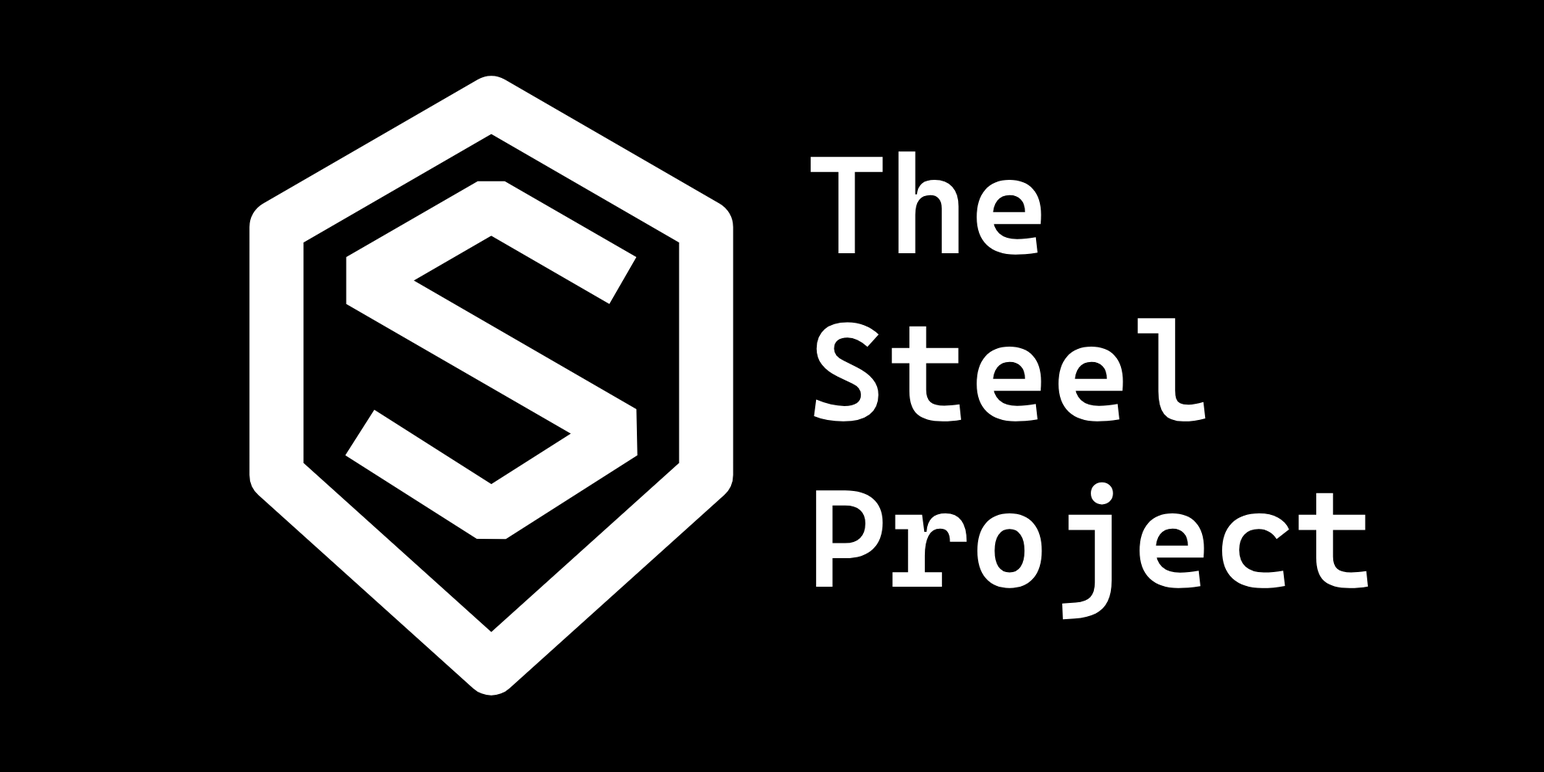
<style>
.page{position:relative;width:1544px;height:772px;background:#000000}
.page>*{position:absolute;margin:0}
.t1{font:139px "CascadiaMono-SemiBold";color:#ffffff}
</style>
<div class="page">
<p class="t1" style="left:811px;top:151px;width:557px;height:469px">The<br>Steel<br>Project</p>
</div>
